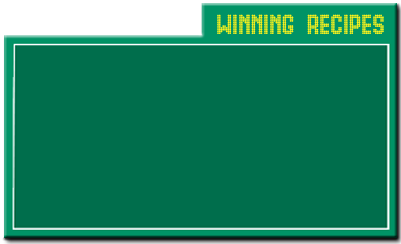
<style>
.page{position:relative;width:401px;height:244px;background:#006e4c}
.page>*{position:absolute;margin:0}
.t1{font:24.5px "Gas";color:#f9f11c}
</style>
<div class="page">
<p class="t1" style="left:217px;top:14px;width:167px;height:21px">WINNING RECIPES</p>
</div>
